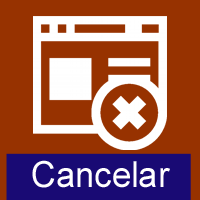
<style>
.page{position:relative;width:200px;height:200px;background:#973200}
.page>*{position:absolute;margin:0}
.t1{font:36px "ArialMT";color:#ffffff;scale:0.96 1}
</style>
<div class="page">
<p class="t1" style="left:32px;top:160px;width:138px;height:28px">Cancelar</p>
</div>
